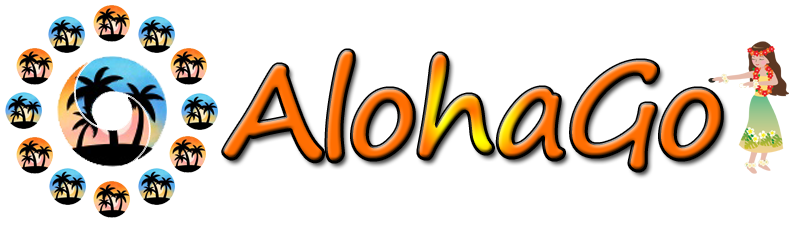
<style>
.page{position:relative;width:800px;height:230px;background:#ffffff}
.page>*{position:absolute;margin:0}
.t1{font:130px "SegoePrint-Bold";letter-spacing:0.04em}
</style>
<div class="page">
<p class="t1" style="left:222px;top:50px;width:501px;height:121px">AlohaGo</p>
</div>
